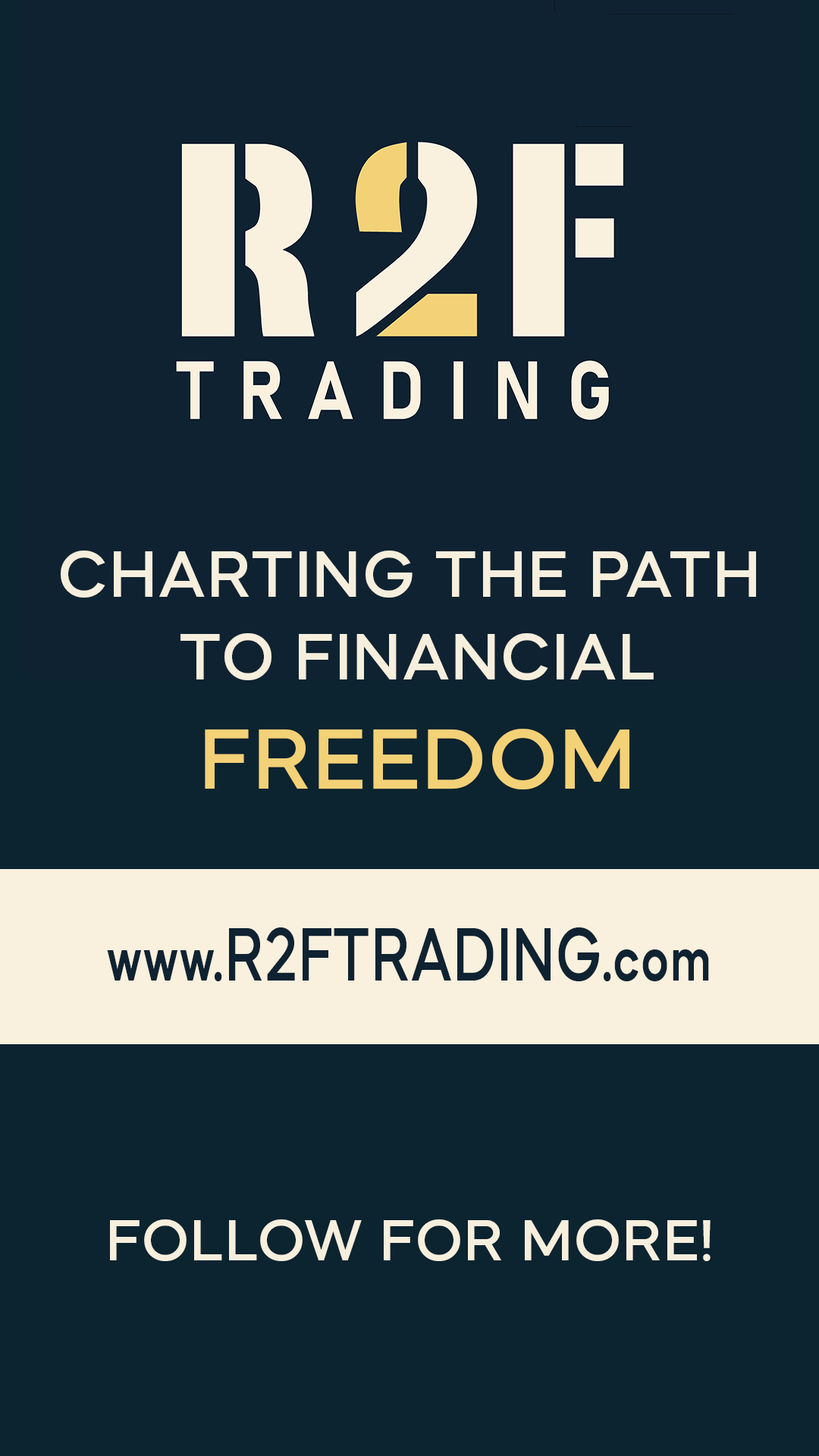
<style>
.page{position:relative;width:819px;height:1456px;background:#0c2330}
.page>*{position:absolute;margin:0}
.t1{font:69.4px "MazzardL-SemiBold";letter-spacing:0.025em;color:#f7efdd}
.t2{font:91px "MazzardL-SemiBold";letter-spacing:0.025em;color:#f3d177}
.t3{font:80px "MazzardL-SemiBold";letter-spacing:0.025em;color:#0f2231;scale:0.76 1}
.t4{font:62.1px "MazzardL-SemiBold";letter-spacing:0.025em;color:#f7efdd}
</style>
<div class="page">
<p class="t1" style="left:61px;top:551px;width:695px;height:238px;text-align:center">CHARTING THE PATH <br>TO FINANCIAL<br><span class="t2">FREEDOM</span></p>
<p class="t3" style="left:107px;top:927px;width:602px;height:54px">www.R2FTRADING.com</p>
<p class="t4" style="left:110px;top:1219px;width:601px;height:42px">FOLLOW FOR MORE!</p>
</div>
